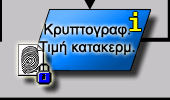
<style>
.page{position:relative;width:170px;height:100px;background:#c6c3c6}
.page>*{position:absolute;margin:0}
.t1{font:14.7px "ArialMT";color:#000000}
</style>
<div class="page">
<p class="t1" style="left:39px;top:23px;width:96px;height:32px;text-align:center">Κρυπτογραφ.<br>Τιμή κατακερμ.</p>
</div>
